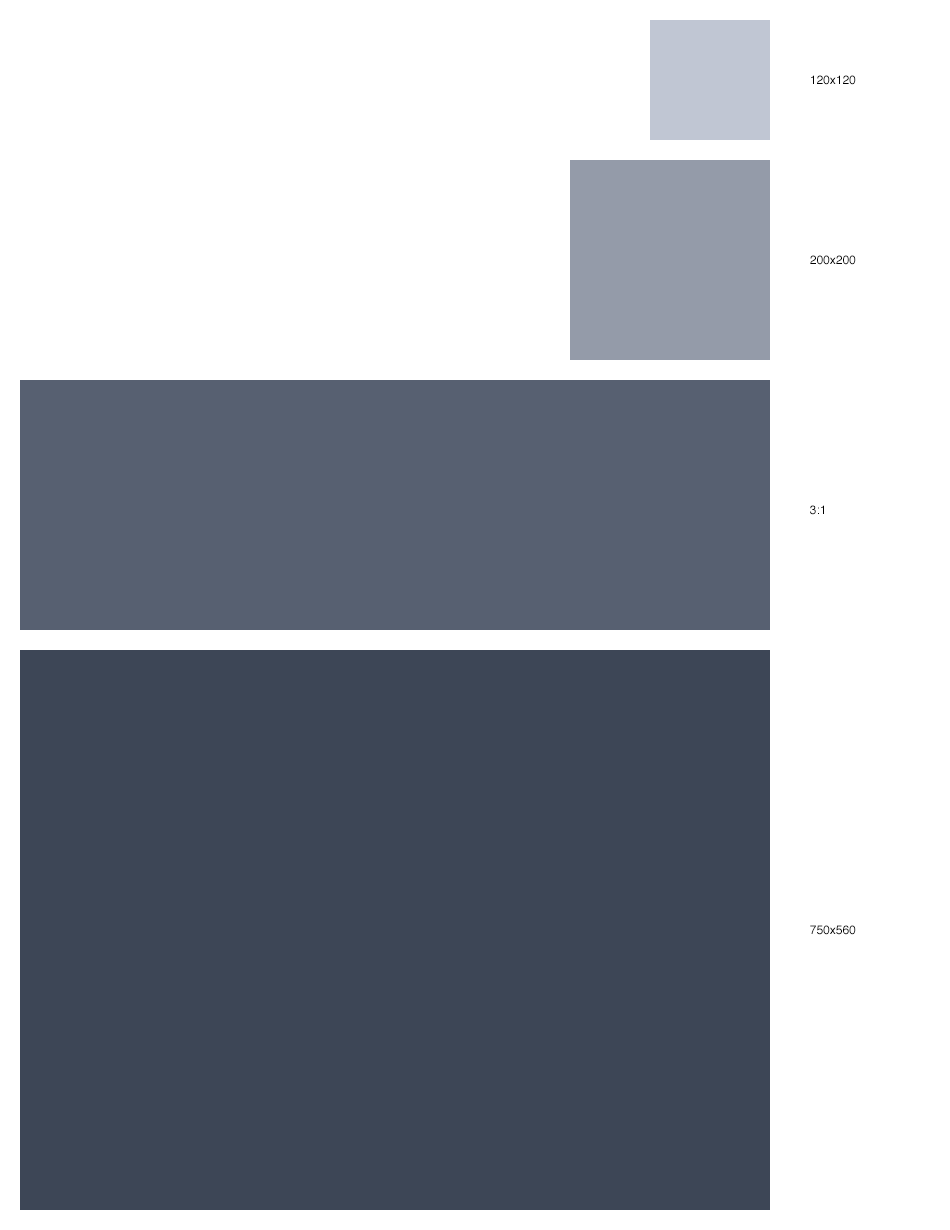
<style>
.page{position:relative;width:950px;height:1230px;background:#ffffff}
.page>*{position:absolute;margin:0}
.t1{font:12px "Helvetica";color:#000000}
</style>
<div class="page">
<p class="t1" style="left:811px;top:75px;width:45px;height:10px">120x120</p>
<p class="t1" style="left:810px;top:255px;width:46px;height:10px">200x200</p>
<p class="t1" style="left:810px;top:505px;width:14px;height:10px">3:1</p>
<p class="t1" style="left:810px;top:925px;width:46px;height:10px">750x560</p>
</div>
